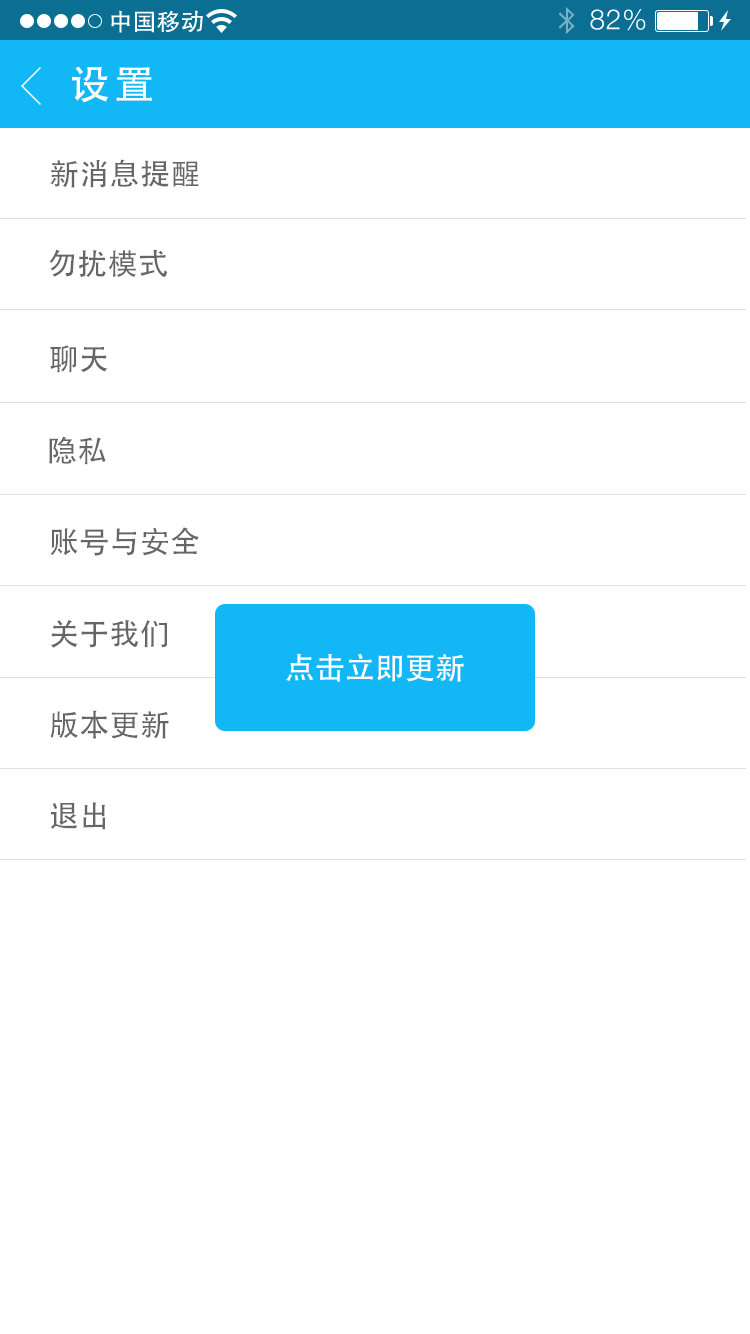
<style>
.page{position:relative;width:750px;height:1334px;background:#ffffff}
.page>*{position:absolute;margin:0}
.t1{font:40px "AdobeHeitiStd-Regular";letter-spacing:0.104em;color:#ffffff}
.t2{font:30px "AdobeHeitiStd-Regular";letter-spacing:0.01em;color:#666666}
.t3{font:30px "AdobeHeitiStd-Regular";color:#ffffff}
</style>
<div class="page">
<p class="t1" style="left:72px;top:66px;width:80px;height:37px">设置</p>
<p class="t2" style="left:50px;top:159px;width:149px;height:29px">新消息提醒</p>
<p class="t2" style="left:49px;top:249px;width:119px;height:29px">勿扰模式</p>
<p class="t2" style="left:50px;top:345px;width:58px;height:28px">聊天</p>
<p class="t2" style="left:49px;top:436px;width:57px;height:29px">隐私</p>
<p class="t2" style="left:50px;top:527px;width:149px;height:29px">账号与安全</p>
<p class="t2" style="left:50px;top:619px;width:117px;height:29px">关于我们</p>
<p class="t3" style="left:286px;top:653px;width:178px;height:29px">点击立即更新</p>
<p class="t2" style="left:50px;top:710px;width:119px;height:29px">版本更新</p>
<p class="t2" style="left:50px;top:802px;width:56px;height:28px">退出</p>
</div>
